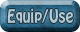
<style>
.page{position:relative;width:80px;height:32px}
.page>*{position:absolute;margin:0}
.t1{font:16.8px "HoboStd";color:#b3cad6;scale:0.83 1}
</style>
<div class="page">
<p class="t1" style="left:7px;top:8px;width:66px;height:15px">Equip/Use</p>
</div>
